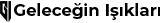
<style>
.page{position:relative;width:160px;height:23px;background:#ffffff}
.page>*{position:absolute;margin:0}
.t1{font:16.5px "Montserrat-Bold";color:#000000}
</style>
<div class="page">
<p class="t1" style="left:14px;top:3px;width:147px;height:17px">Geleceğin Işıkları</p>
</div>
